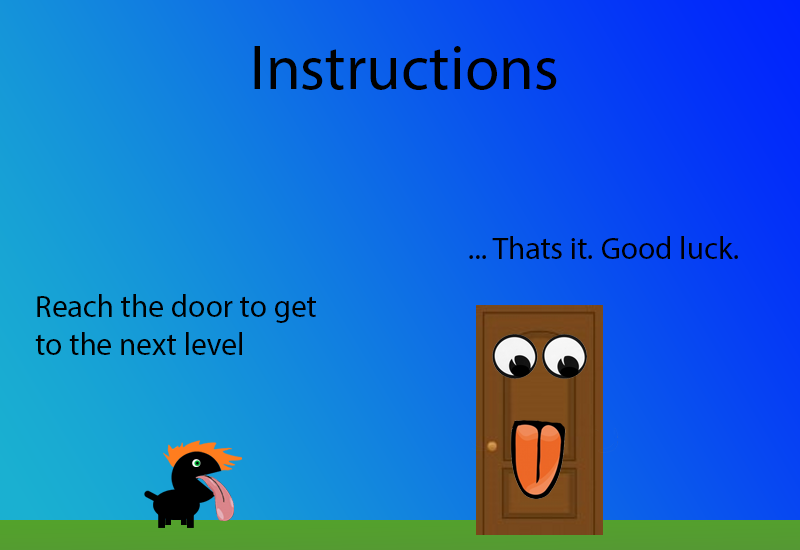
<style>
.page{position:relative;width:800px;height:550px}
.page>*{position:absolute;margin:0}
.t1{font:62.5px "MyriadPro-Regular";color:#000000}
.t2{font:31.2px "MyriadPro-Regular";color:#000000}
</style>
<div class="page">
<p class="t1" style="left:254px;top:46px;width:303px;height:44px">Instructions</p>
<p class="t2" style="left:469px;top:236px;width:269px;height:23px">... Thats it. Good luck.</p>
<p class="t2" style="left:35px;top:294px;width:281px;height:61px">Reach the door to get to the next level</p>
</div>
